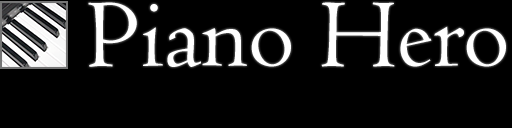
<style>
.page{position:relative;width:512px;height:128px;background:#000000}
.page>*{position:absolute;margin:0}
.t1{font:100px "Centaur";color:#ffffff}
</style>
<div class="page">
<p class="t1" style="left:88px;top:2px;width:418px;height:65px">Piano Hero</p>
</div>
